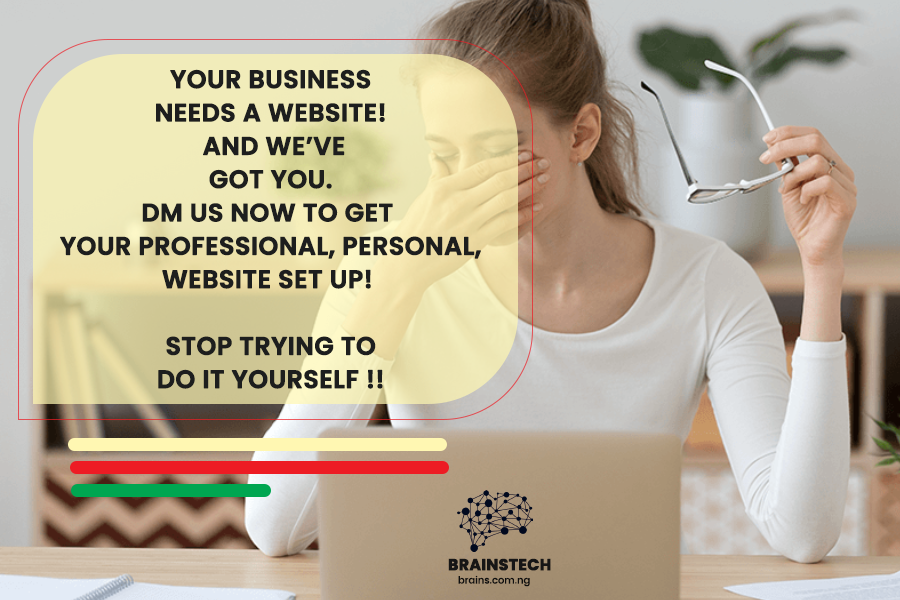
<style>
.page{position:relative;width:900px;height:600px}
.page>*{position:absolute;margin:0}
.t1{font:25px/33.3px "Poppins-SemiBold";color:#1d1e1e;text-transform:uppercase;font-weight:bold}
.t2{font:15.7px "Poppins-Bold";color:#171616;text-transform:uppercase;font-weight:bold}
.t3{font:9.9px "Poppins-Medium";color:#0f0f0f}
</style>
<div class="page">
<p class="t1" style="left:60px;top:69px;width:421px;height:320px;text-align:center">yOUR BUSINESS<br>NEEDS A WEBSITE!<br> AND WE’VE<br>GOT YOU.<br>DM US NOW TO GET <br>YOUR PROFESSIONAL, PERSONAL,<br>WEBSITE SET UP! <br><br>STOP TRYING TO<br>DO IT YOURSELF !!</p>
<p class="t2" style="left:448px;top:558px;width:103px;height:13px">BrainsTECH</p>
<p class="t3" style="left:458px;top:575px;width:72px;height:12px">brains.com.ng</p>
</div>
